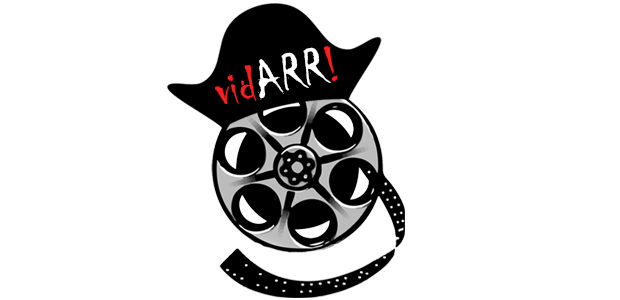
<style>
.page{position:relative;width:620px;height:300px;background:#ffffff}
.page>*{position:absolute;margin:0}
.t1{font:52.3px "Chiller-Regular";color:#f91f1f}
.t2{font:52.3px "Chiller-Regular";color:#ffffff}
</style>
<div class="page">
<p class="t1" style="left:215px;top:46px;width:123px;height:58px;rotate:-13deg">vid<span class="t2">ARR</span>!</p>
</div>
